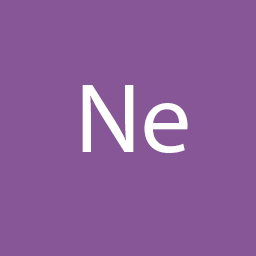
<style>
.page{position:relative;width:256px;height:256px;background:#865696}
.page>*{position:absolute;margin:0}
.t1{font:100px "MyriadPro-Regular";color:#ffffff}
</style>
<div class="page">
<p class="t1" style="left:82px;top:85px;width:106px;height:68px">Ne</p>
</div>
